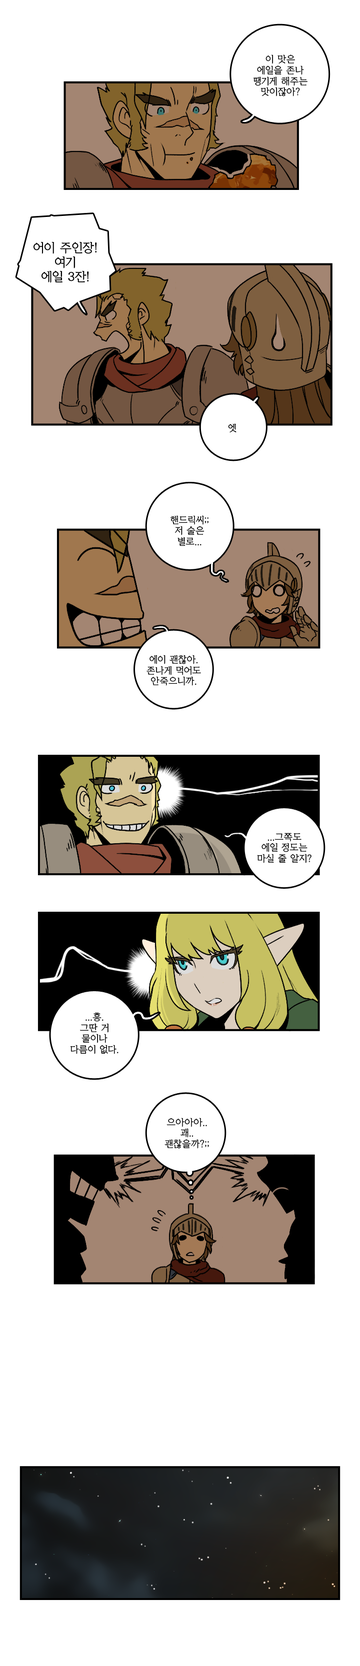
<style>
.page{position:relative;width:360px;height:1666px;background:#ffffff}
.page>*{position:absolute;margin:0}
.t1{font:9px "KoreanYMJ-B";color:#000000}
.t2{font:12px "KoreanYMJ-B";color:#000000}
</style>
<div class="page">
<p class="t1" style="left:253px;top:54px;width:55px;height:42px;text-align:center">이 맛은<br>에일을 존나<br>땡기게 해주는<br>맛이잖아?</p>
<p class="t2" style="left:34px;top:242px;width:63px;height:41px;text-align:center">어이 주인장!<br>여기<br>에일 3잔!</p>
<p class="t1" style="left:228px;top:424px;width:8px;height:8px">엣</p>
<p class="t1" style="left:170px;top:516px;width:38px;height:30px;text-align:center">핸드릭씨;;<br>저 술은<br>별로...</p>
<p class="t1" style="left:146px;top:655px;width:55px;height:31px;text-align:center">에이 괜찮아.<br>존나게 먹어도<br>안죽으니까.</p>
<p class="t1" style="left:257px;top:833px;width:55px;height:31px;text-align:center">...그쪽도<br>에일 정도는<br>마실 줄 알지?</p>
<p class="t1" style="left:70px;top:1012px;width:48px;height:42px;text-align:center">...흥.<br>그딴 거<br>물이나<br>다름이 없다.</p>
<p class="t1" style="left:164px;top:1118px;width:45px;height:31px;text-align:center">으아아아..<br>괘..<br>괜찮을까?;;</p>
</div>
